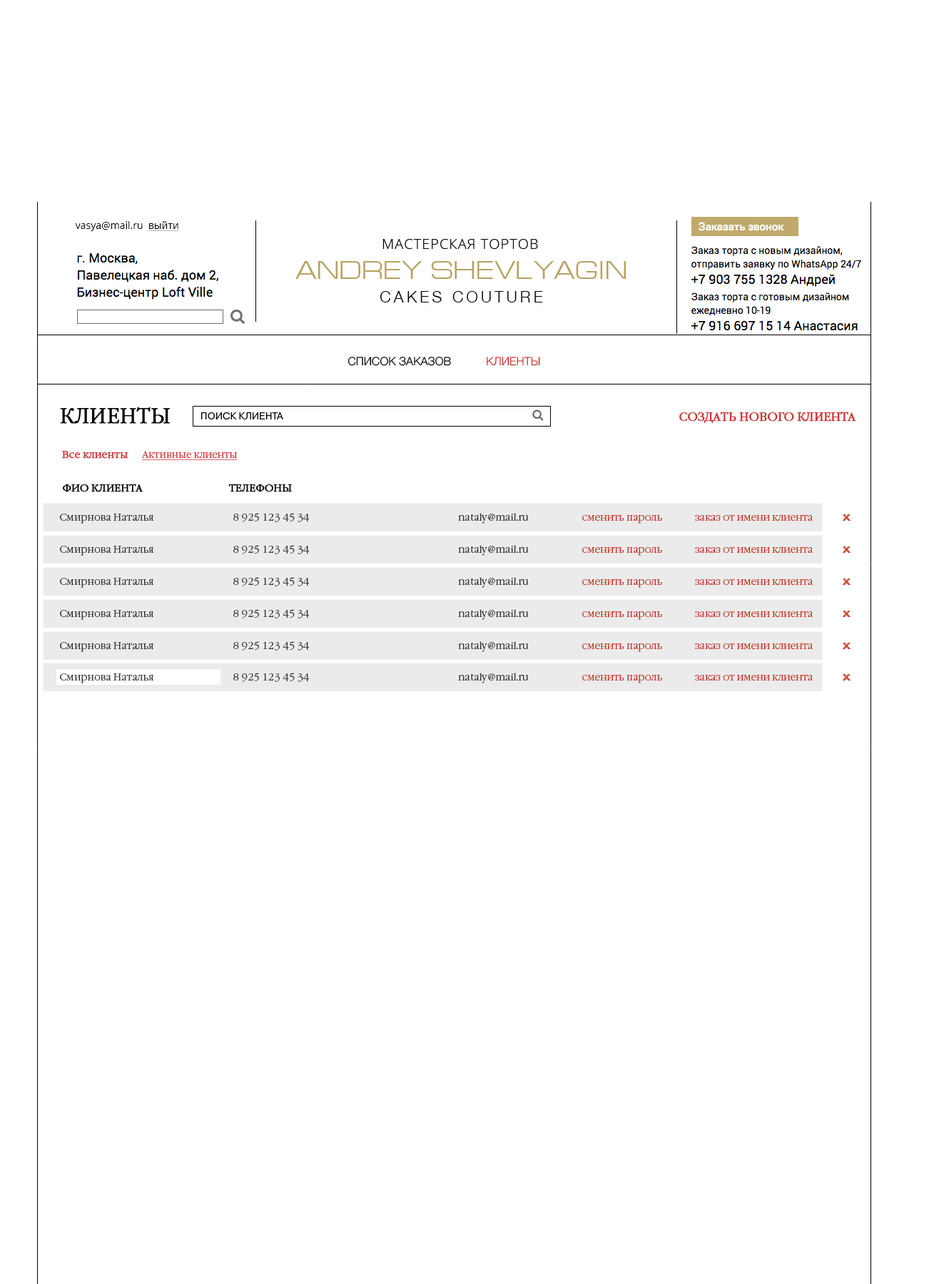
<style>
.page{position:relative;width:929px;height:1284px;background:#ffffff}
.page>*{position:absolute;margin:0}
.t1{font:11.4px "Helvetica-Light";color:#070100;text-transform:uppercase}
.t2{font:11.4px "Helvetica-Light";color:#c03728;text-transform:uppercase}
.t3{font:20.3px "GaramondC-Light";color:#000000;font-weight:bold}
.t4{font:10px "PragmaticaLight-Reg";color:#000000}
.t5{font:11.4px "GaramondC-Light";color:#cc3333;font-weight:bold}
.t6{font:10px "GaramondC-Light";color:#cc3333;text-decoration:underline}
.t7{font:10px "GaramondC-Light";color:#cc3333;font-weight:bold}
.t8{font:10px "GaramondC-Light";color:#000000;text-transform:uppercase;font-weight:bold}
.t9{font:10px "GaramondC-Light";color:#333333}
.t10{font:10px "GaramondC-Light";color:#c03728}
.t11{font:11.7px "Arial-BoldMT";color:#ce4c3e;scale:1.33 1}
</style>
<div class="page">
<p class="t1" style="left:347px;top:357px;width:193px;height:9px">Список заказов           <span class="t2">Клиенты</span></p>
<p class="t3" style="left:60px;top:407px;width:110px;height:17px">КЛИЕНТЫ</p>
<p class="t4" style="left:201px;top:412px;width:82px;height:7px">ПОИСК КЛИЕНТА</p>
<p class="t5" style="left:679px;top:412px;width:177px;height:12px">СОЗДАТЬ НОВОГО КЛИЕНТА</p>
<p class="t6" style="left:62px;top:451px;width:176px;height:9px"><span class="t7">Все клиенты      </span>Активные клиенты</p>
<p class="t8" style="left:63px;top:484px;width:229px;height:8px">ФИО Клиента                                 Телефоны</p>
<p class="t9" style="left:60px;top:513px;width:753px;height:11px">Смирнова Наталья                                  8 925 123 45 34                                                                nataly@mail.ru                       <span class="t10">сменить пароль              заказ от имени клиента</span></p>
<p class="t11" style="left:842px;top:514px;width:9px;height:7px">х</p>
<p class="t9" style="left:60px;top:545px;width:753px;height:11px">Смирнова Наталья                                  8 925 123 45 34                                                                nataly@mail.ru                       <span class="t10">сменить пароль              заказ от имени клиента</span></p>
<p class="t11" style="left:842px;top:546px;width:9px;height:7px">х</p>
<p class="t9" style="left:60px;top:577px;width:753px;height:11px">Смирнова Наталья                                  8 925 123 45 34                                                                nataly@mail.ru                       <span class="t10">сменить пароль              заказ от имени клиента</span></p>
<p class="t11" style="left:842px;top:578px;width:9px;height:7px">х</p>
<p class="t9" style="left:60px;top:609px;width:753px;height:11px">Смирнова Наталья                                  8 925 123 45 34                                                                nataly@mail.ru                       <span class="t10">сменить пароль              заказ от имени клиента</span></p>
<p class="t11" style="left:842px;top:611px;width:9px;height:6px">х</p>
<p class="t9" style="left:60px;top:641px;width:753px;height:11px">Смирнова Наталья                                  8 925 123 45 34                                                                nataly@mail.ru                       <span class="t10">сменить пароль              заказ от имени клиента</span></p>
<p class="t11" style="left:842px;top:643px;width:9px;height:6px">х</p>
<p class="t9" style="left:60px;top:673px;width:753px;height:10px">Смирнова Наталья                                  8 925 123 45 34                                                                nataly@mail.ru                       <span class="t10">сменить пароль              заказ от имени клиента</span></p>
<p class="t11" style="left:842px;top:674px;width:9px;height:6px">х</p>
</div>
